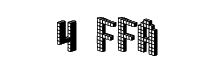
<style>
.page{position:relative;width:220px;height:70px;background:#ffffff}
.page>*{position:absolute;margin:0}
.t1{font:41px "Blox-BRK";color:#000000}
</style>
<div class="page">
<p class="t1" style="left:57px;top:17px;width:101px;height:39px">4 FFA</p>
</div>
